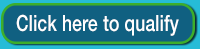
<style>
.page{position:relative;width:200px;height:49px;background:#106081}
.page>*{position:absolute;margin:0}
.t1{font:22.3px "HelveticaNeue-Medium";letter-spacing:0.01em;color:#ffffff;scale:0.78 1}
</style>
<div class="page">
<p class="t1" style="left:16px;top:14px;width:163px;height:22px">Click here to qualify</p>
</div>
